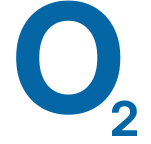
<style>
.page{position:relative;width:151px;height:144px;background:#ffffff}
.page>*{position:absolute;margin:0}
.t1{font:152.2px "Inter28pt-Bold";color:#0466a5}
.t2{font:48px "Inter28pt-Bold";color:#0466a5}
</style>
<div class="page">
<p class="t1" style="left:16px;top:0px;width:105px;height:115px">O</p>
<p class="t2" style="left:112px;top:100px;width:25px;height:36px">2</p>
</div>
